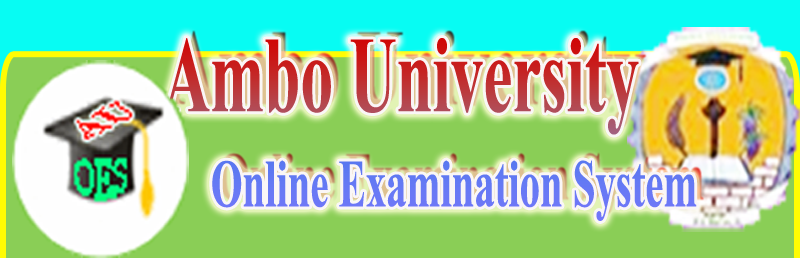
<style>
.page{position:relative;width:800px;height:258px;background:#8ace56}
.page>*{position:absolute;margin:0}
.t1{font:67.5px "TimesNewRomanPS-BoldMT";scale:0.6 1}
.t2{font:107.9px "TimesNewRomanPS-BoldMT";scale:0.6 1}
</style>
<div class="page">
<p class="t1" style="left:163px;top:38px;width:534px;height:183px"><span class="t2">Ambo University<br>    </span>Online Examination System</p>
</div>
